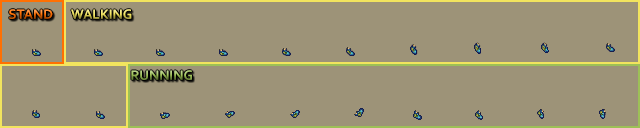
<style>
.page{position:relative;width:640px;height:128px;background:#9d9378}
.page>*{position:absolute;margin:0}
.t1{font:14px "Corbel-Bold"}
</style>
<div class="page">
<p class="t1" style="left:9px;top:9px;width:44px;height:10px">STAND</p>
<p class="t1" style="left:71px;top:9px;width:61px;height:10px">WALKING</p>
<p class="t1" style="left:131px;top:70px;width:61px;height:10px">RUNNING</p>
</div>
